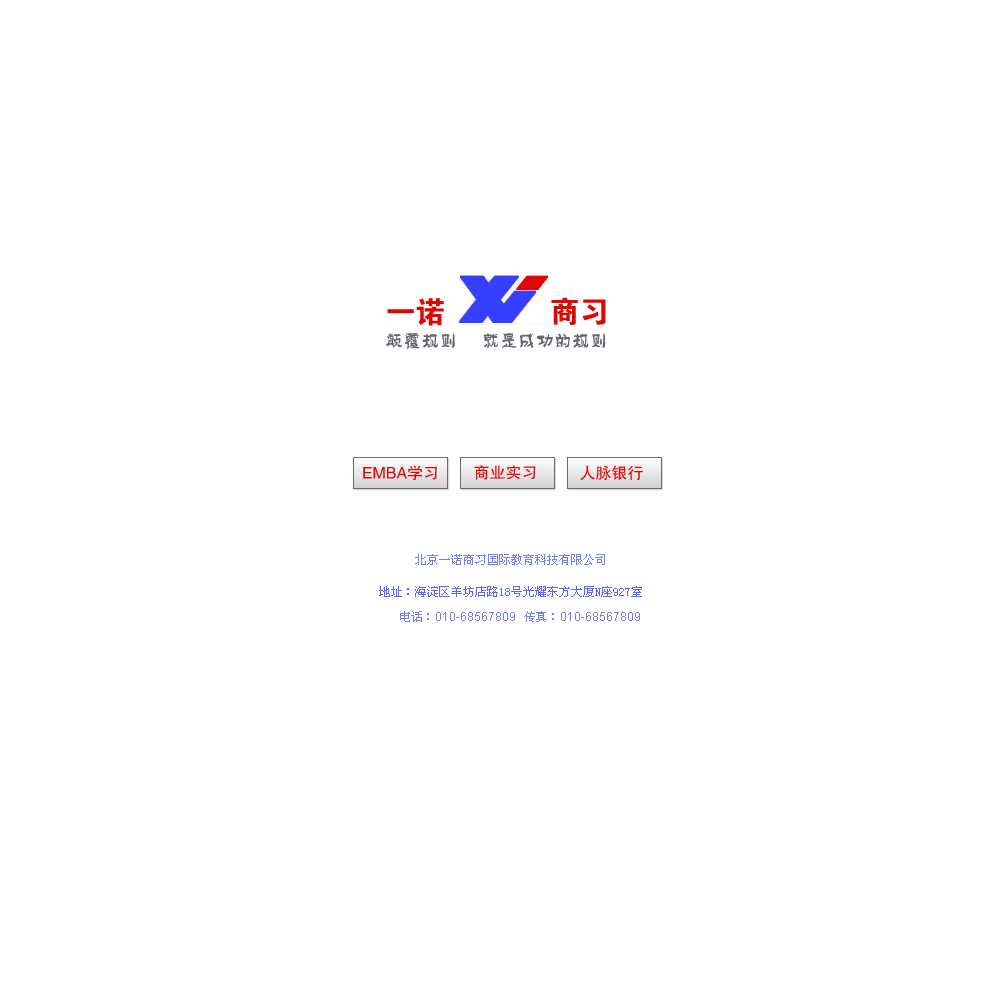
<style>
.page{position:relative;width:1000px;height:1000px;background:#ffffff}
.page>*{position:absolute;margin:0}
.t1{font:30px "FZDHTJW--GB1-0";color:#e10602}
.t2{font:18px "FZPHTJW--GB1-0";color:#646570}
.t3{font:16px "FZHTJW--GB1-0";color:#e10602}
.t4{font:12px "SimSun";color:#777df9}
.t5{font:12px "SimSun";color:#5c63fc}
.t6{font:12px "ArialMT";color:#777df9}
</style>
<div class="page">
<p class="t1" style="left:387px;top:298px;width:57px;height:28px">一诺</p>
<p class="t1" style="left:551px;top:297px;width:55px;height:29px">商习</p>
<p class="t2" style="left:386px;top:333px;width:220px;height:16px">颠覆规则      就是成功的规则</p>
<p class="t3" style="left:363px;top:465px;width:74px;height:16px">EMBA学习</p>
<p class="t3" style="left:474px;top:465px;width:62px;height:15px">商业实习</p>
<p class="t3" style="left:580px;top:465px;width:63px;height:15px">人脉银行</p>
<p class="t4" style="left:415px;top:554px;width:190px;height:11px">北京一诺商习国际教育科技有限公司</p>
<p class="t5" style="left:379px;top:586px;width:263px;height:11px">地址：海淀区羊坊店路18号光耀东方大厦N座927室</p>
<p class="t6" style="left:400px;top:611px;width:115px;height:11px"><span class="t4">电话：</span>010-68567809</p>
<p class="t6" style="left:524px;top:611px;width:116px;height:11px"><span class="t4">传真：</span>010-68567809</p>
</div>
